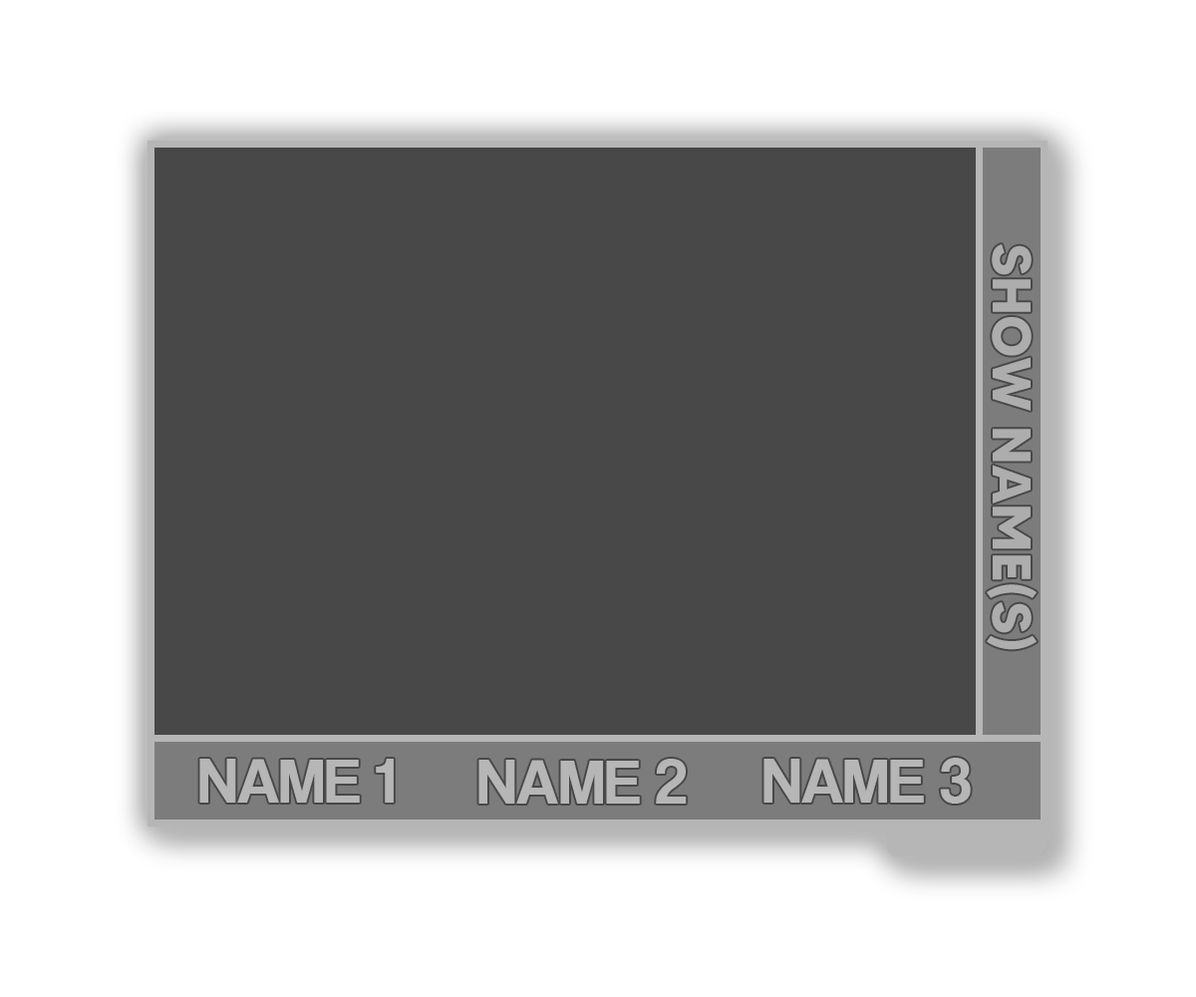
<style>
.page{position:relative;width:1196px;height:997px;background:#484848}
.page>*{position:absolute;margin:0}
.t1{font:54.2px "MADETOMMY-Bold";color:#adadad}
.t2{font:65.8px "CoolveticaRg-Regular";color:#b6b6b6}
</style>
<div class="page">
<p class="t1" style="left:987px;top:244px;width:51px;height:406px;rotate:90deg">SHOW NAME(S)</p>
<p class="t2" style="left:199px;top:759px;width:195px;height:43px">NAME 1</p>
<p class="t2" style="left:478px;top:759px;width:209px;height:44px">NAME 2</p>
<p class="t2" style="left:764px;top:758px;width:207px;height:45px">NAME 3</p>
</div>
